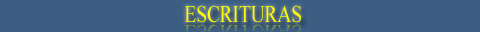
<style>
.page{position:relative;width:480px;height:32px;background:#3c5e83}
.page>*{position:absolute;margin:0}
.t1{font:24px "TimesNewRomanPSMT";color:#ffff01;scale:0.8 1}
</style>
<div class="page">
<p class="t1" style="left:184px;top:5px;width:117px;height:18px">ESCRITURAS</p>
</div>
